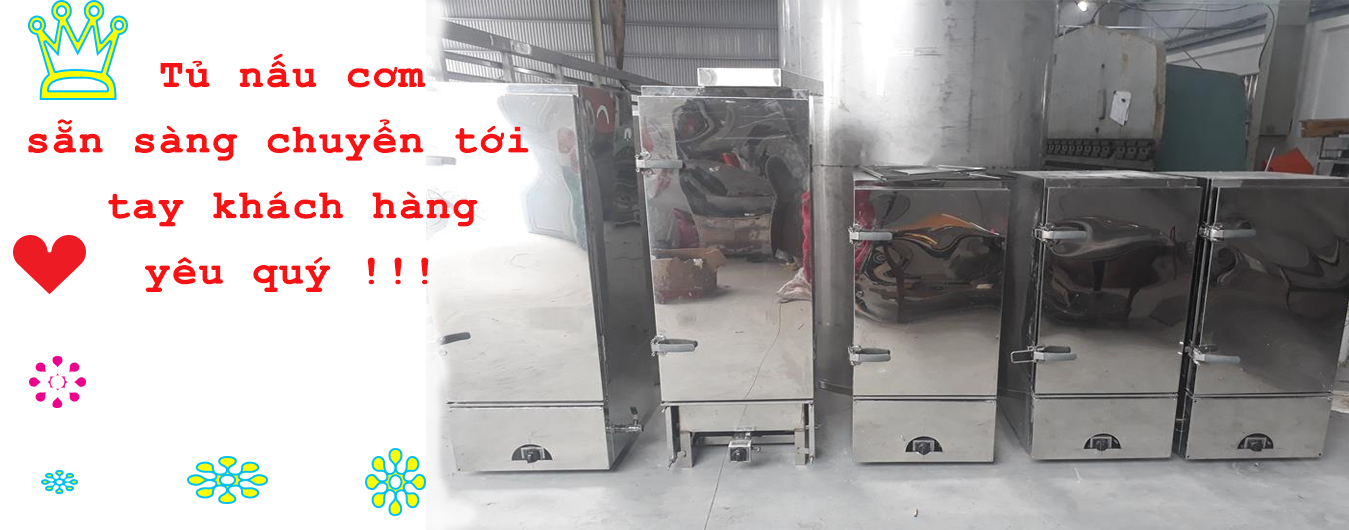
<style>
.page{position:relative;width:1349px;height:530px;background:#ffffff}
.page>*{position:absolute;margin:0}
.t1{font:39.8px "CourierNewPS-BoldMT";letter-spacing:0.02em;color:#f81213;font-weight:bold;scale:1.04 1}
</style>
<div class="page">
<p class="t1" style="left:28px;top:53px;width:501px;height:239px;text-align:center">Tủ nấu cơm<br>sẵn sàng chuyển tới <br>tay khách hàng<br>yêu quý !!!</p>
</div>
